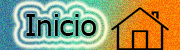
<style>
.page{position:relative;width:180px;height:50px}
.page>*{position:absolute;margin:0}
.t1{font:30px "Tahoma";color:#000000}
</style>
<div class="page">
<p class="t1" style="left:26px;top:14px;width:70px;height:22px">Inicio</p>
</div>
